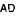
<style>
.page{position:relative;width:16px;height:16px;background:#ffffff}
.page>*{position:absolute;margin:0}
.t1{font:11px "HelveticaLTStd-Roman";color:#000000}
.t2{font:22px "HelveticaLTStd-Roman";letter-spacing:0.1em;color:#ffffff}
</style>
<div class="page">
<p class="t1" style="left:0px;top:4px;width:15px;height:8px">AD</p>
<p class="t2" style="left:6px;top:9px;width:11px;height:3px">..</p>
</div>
